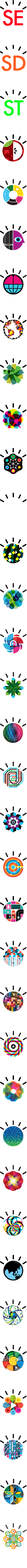
<style>
.page{position:relative;width:27px;height:1568px;background:#ffffff}
.page>*{position:absolute;margin:0}
.t1{font:19.7px "Futura";color:#ff001d;font-weight:bold}
.t2{font:19.7px "Futura";color:#ff5b1d;font-weight:bold}
.t3{font:19.7px "Futura";color:#00ff1d;font-weight:bold}
</style>
<div class="page">
<p class="t1" style="left:3px;top:10px;width:20px;height:16px">SE</p>
<p class="t2" style="left:1px;top:55px;width:25px;height:16px">SD</p>
<p class="t3" style="left:4px;top:100px;width:20px;height:16px">ST</p>
</div>
